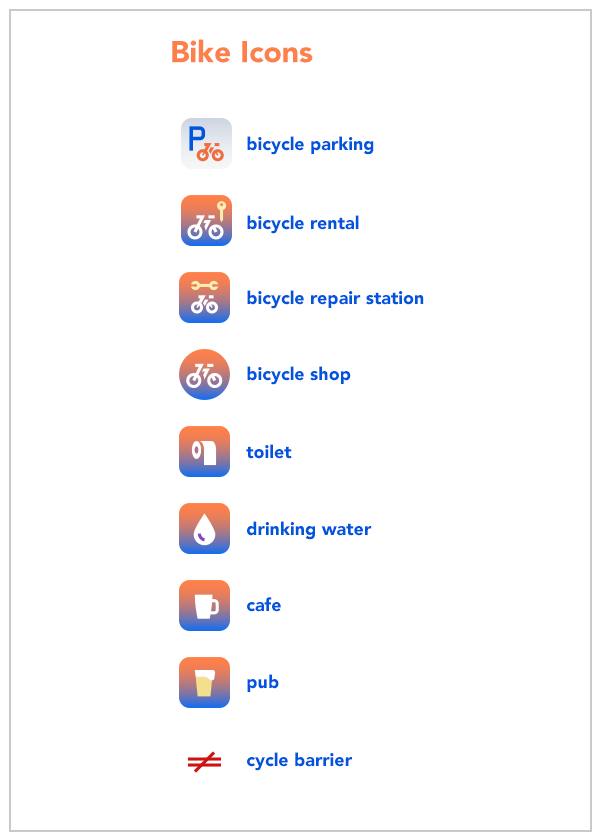
<style>
.page{position:relative;width:600px;height:840px;background:#ffffff}
.page>*{position:absolute;margin:0}
.t1{font:30px "Avenir-Black";color:#fd804b}
.t2{font:18px "Avenir-Black";color:#0055df}
</style>
<div class="page">
<p class="t1" style="left:172px;top:39px;width:141px;height:24px">Bike Icons</p>
<p class="t2" style="left:247px;top:136px;width:127px;height:19px">bicycle parking</p>
<p class="t2" style="left:247px;top:215px;width:112px;height:19px">bicycle rental</p>
<p class="t2" style="left:247px;top:290px;width:177px;height:19px">bicycle repair station</p>
<p class="t2" style="left:247px;top:366px;width:104px;height:19px">bicycle shop</p>
<p class="t2" style="left:246px;top:444px;width:46px;height:15px">toilet</p>
<p class="t2" style="left:247px;top:521px;width:125px;height:19px">drinking water</p>
<p class="t2" style="left:247px;top:597px;width:34px;height:15px">cafe</p>
<p class="t2" style="left:247px;top:674px;width:32px;height:18px">pub</p>
<p class="t2" style="left:247px;top:752px;width:105px;height:19px">cycle barrier</p>
</div>
